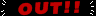
<style>
.page{position:relative;width:96px;height:16px;background:#000000}
.page>*{position:absolute;margin:0}
.t1{font:17.6px "Skia_2.919wght";letter-spacing:0.075em;color:#c00000;scale:1.04 1}
</style>
<div class="page">
<p class="t1" style="left:18px;top:1px;width:62px;height:15px;rotate:-2deg">OUT!!</p>
</div>
